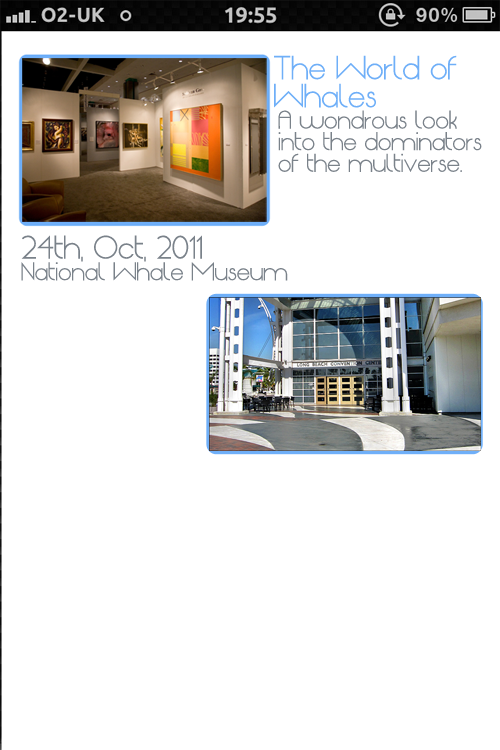
<style>
.page{position:relative;width:500px;height:750px;background:#ffffff}
.page>*{position:absolute;margin:0}
.t1{font:23.4px "Origin-Regular";color:#6faff8}
.t2{font:18px "Origin-Regular";color:#7a828a}
.t3{font:23px "Origin-Regular";color:#7a828a}
</style>
<div class="page">
<p class="t1" style="left:274px;top:55px;width:183px;height:53px">The World of <br>Whales</p>
<p class="t2" style="left:278px;top:110px;width:204px;height:62px">A wondrous look <br>into the dominators <br>of the multiverse.</p>
<p class="t2" style="left:21px;top:235px;width:267px;height:46px"><span class="t3">24th, Oct, 2011<br></span>National Whale Museum</p>
</div>
